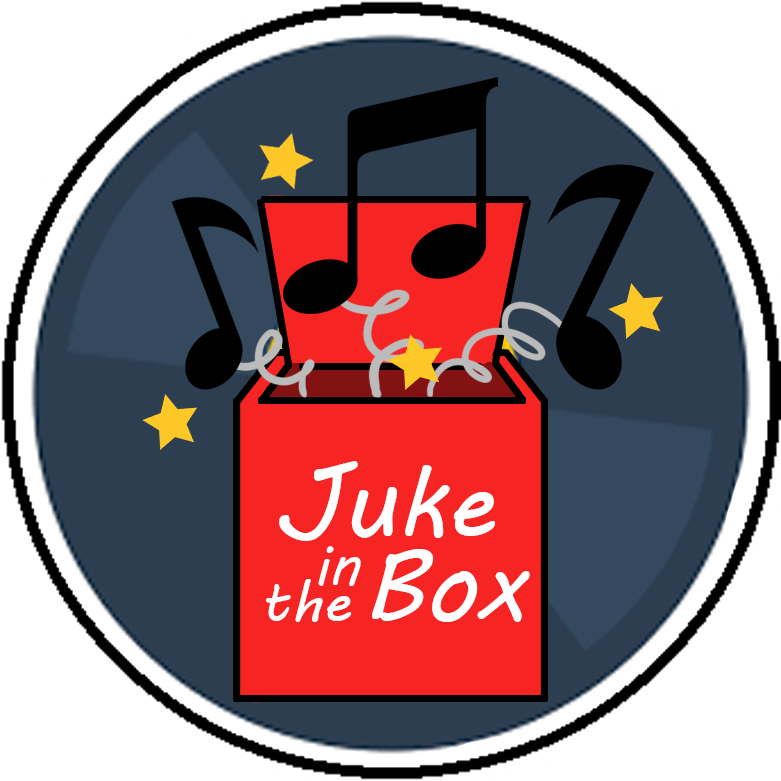
<style>
.page{position:relative;width:781px;height:781px;background:#ffffff}
.page>*{position:absolute;margin:0}
.t1{font:100px "MVBoli";color:#ffffff}
.t2{font:58.3px "MVBoli";color:#ffffff}
</style>
<div class="page">
<p class="t1" style="left:279px;top:461px;width:216px;height:80px">Juke</p>
<p class="t2" style="left:318px;top:546px;width:43px;height:40px">in</p>
<p class="t1" style="left:372px;top:549px;width:158px;height:73px">Box</p>
<p class="t2" style="left:266px;top:579px;width:85px;height:43px">the</p>
</div>
